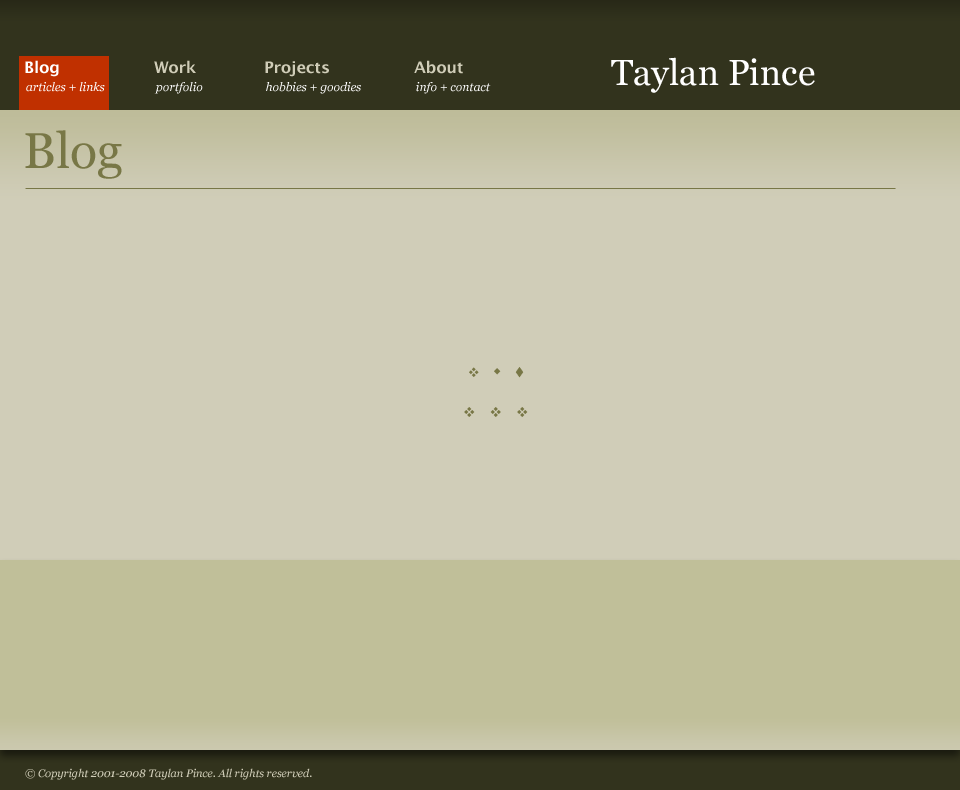
<style>
.page{position:relative;width:960px;height:790px;background:#d0cdb8}
.page>*{position:absolute;margin:0}
.t1{font:16px "LucidaGrande-Bold";color:#ffffff}
.t2{font:16px "LucidaGrande-Bold";color:#d0cdb8}
.t3{font:36px "Georgia";color:#ffffff}
.t4{font:12px "Georgia-Italic";color:#ffffff}
.t5{font:50px "Georgia";color:#787746}
.t6{font:11px "Georgia-Italic";color:#d0cdb8}
</style>
<div class="page">
<p class="t1" style="left:25px;top:60px;width:34px;height:17px">Blog</p>
<p class="t2" style="left:154px;top:60px;width:42px;height:14px">Work</p>
<p class="t2" style="left:265px;top:61px;width:64px;height:16px">Projects</p>
<p class="t2" style="left:414px;top:60px;width:49px;height:14px">About</p>
<p class="t3" style="left:611px;top:57px;width:204px;height:36px">Taylan Pince</p>
<p class="t4" style="left:26px;top:82px;width:79px;height:10px">articles + links</p>
<p class="t4" style="left:154px;top:82px;width:49px;height:12px">portfolio</p>
<p class="t4" style="left:266px;top:82px;width:95px;height:12px">hobbies + goodies</p>
<p class="t4" style="left:416px;top:82px;width:75px;height:12px">info + contact</p>
<p class="t5" style="left:25px;top:130px;width:97px;height:49px">Blog</p>
<p class="t6" style="left:25px;top:768px;width:287px;height:12px">© Copyright 2001-2008 Taylan Pince. All rights reserved.</p>
</div>
